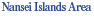
<style>
.page{position:relative;width:94px;height:18px;background:#ffffff}
.page>*{position:absolute;margin:0}
.t1{font:12px "RyuminPro-ExBold";letter-spacing:-0.08em;color:#2f4e96;scale:0.9 1}
</style>
<div class="page">
<p class="t1" style="left:1px;top:2px;width:91px;height:10px">Nansei Islands Area</p>
</div>
